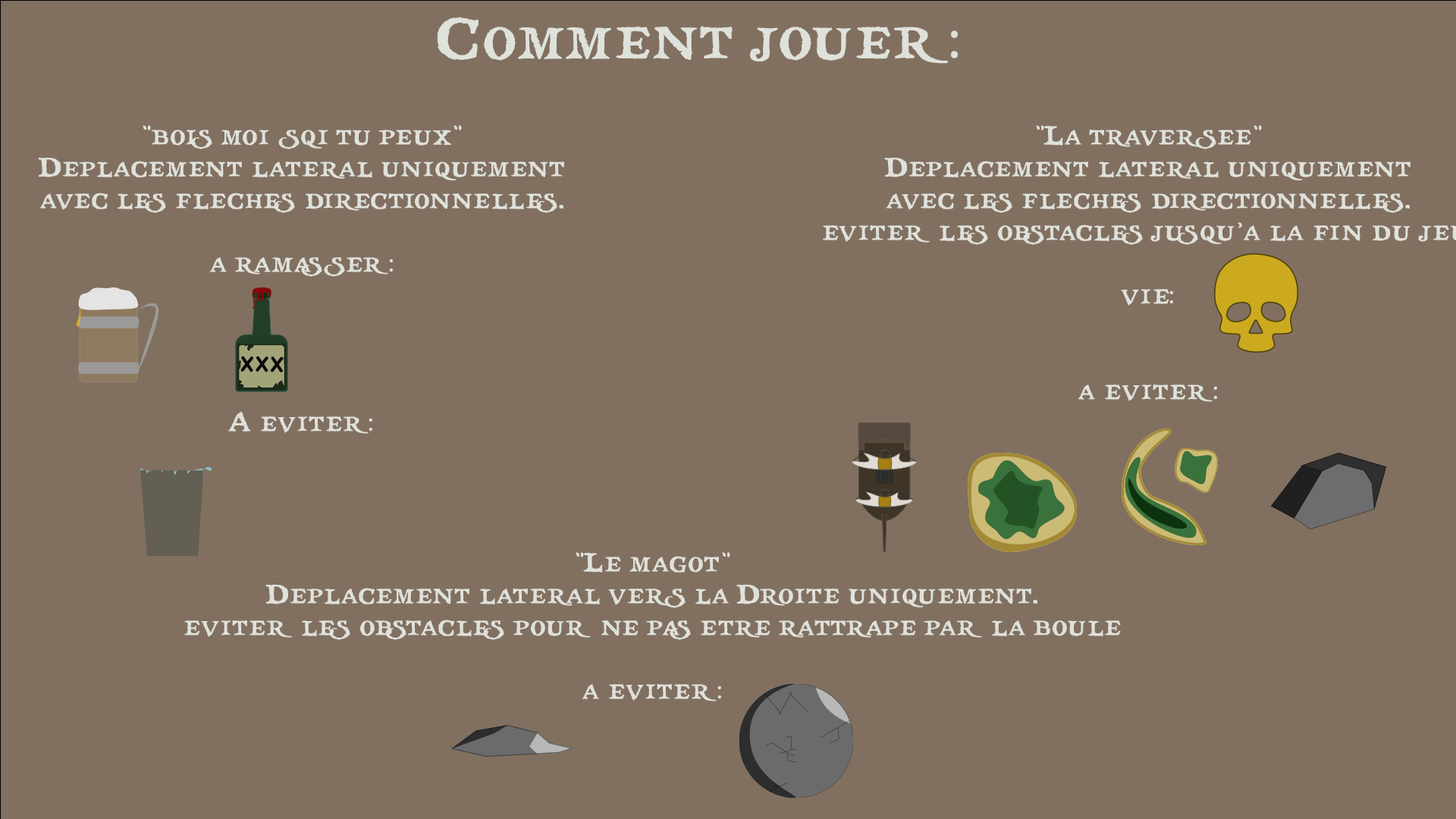
<style>
.page{position:relative;width:1456px;height:819px;background:#817060}
.page>*{position:absolute;margin:0}
.t1{font:57.6px "treasuremap";color:#dfe1db}
.t2{font:57.6px "MyriadPro-Regular";color:#dfe1db}
.t3{font:26.5px "treasuremap";color:#dfe1db}
.t4{font:26.5px "MyriadPro-Regular";color:#dfe1db}
</style>
<div class="page">
<p class="t1" style="left:437px;top:17px;width:521px;height:47px">Comment jouer<span class="t2">:</span></p>
<p class="t3" style="left:38px;top:125px;width:526px;height:309px;text-align:center">"bois moi sqi tu peux"<br>Deplacement lateral uniquement <br>avec les fleches directionnelles.<br><br>a ramasser<span class="t4">:</span><br><br><br><br><br>A eviter<span class="t4">:</span></p>
<p class="t3" style="left:184px;top:552px;width:937px;height:149px;text-align:center">"Le magot"<br>Deplacement lateral vers la Droite uniquement.<br>eviter les obstacles pour ne pas etre rattrape par la boule<br><br>a eviter<span class="t4">:</span></p>
</div>
